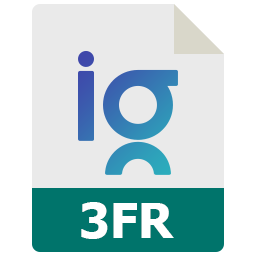
<style>
.page{position:relative;width:256px;height:256px;background:#eaeaea}
.page>*{position:absolute;margin:0}
.t1{font:48px "Tahoma-Bold";color:#ffffff}
</style>
<div class="page">
<p class="t1" style="left:81px;top:202px;width:93px;height:37px">3FR</p>
</div>
